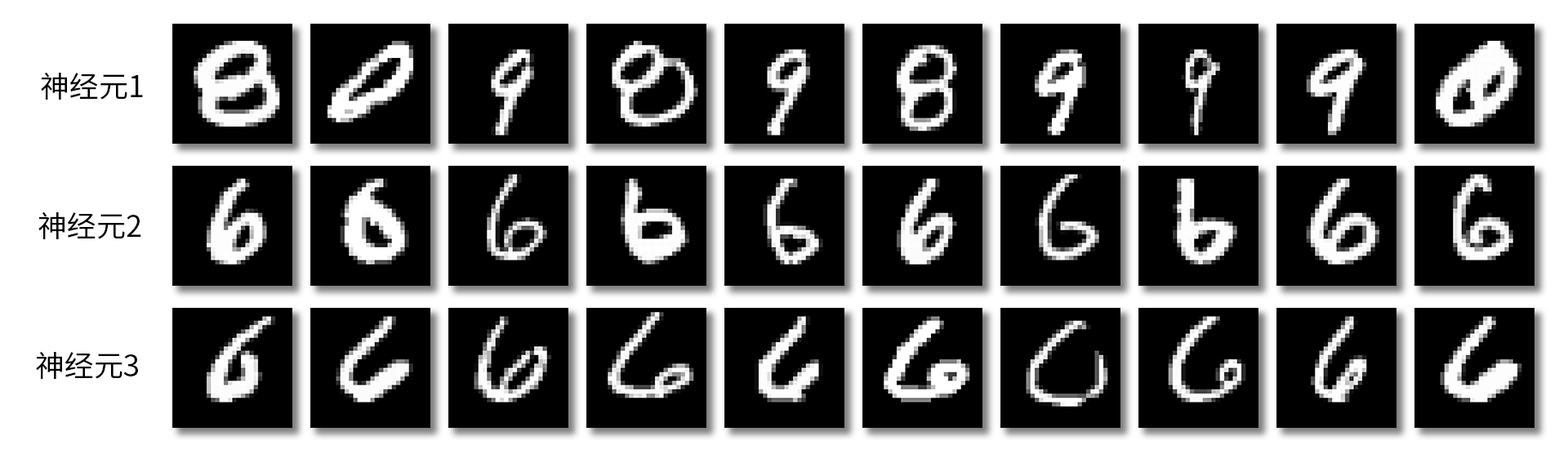
<style>
.page{position:relative;width:1568px;height:454px;background:#000000}
.page>*{position:absolute;margin:0}
.t1{font:29.4px "SourceHanSansCN-Regular";color:#000000}
</style>
<div class="page">
<p class="t1" style="left:41px;top:72px;width:102px;height:28px">神经元1</p>
<p class="t1" style="left:38px;top:212px;width:103px;height:27px">神经元2</p>
<p class="t1" style="left:36px;top:351px;width:102px;height:28px">神经元3</p>
</div>
